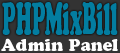
<style>
.page{position:relative;width:120px;height:53px;background:#037da0}
.page>*{position:absolute;margin:0}
.t1{font:44.7px "CooperBlackStd";color:#037da0;scale:0.42 1}
.t2{font:17px "CooperBlackStd";color:#ffffff}
</style>
<div class="page">
<p class="t1" style="left:2px;top:2px;width:116px;height:33px">PHPMixBill</p>
<p class="t2" style="left:1px;top:38px;width:117px;height:13px">Admin Panel</p>
</div>
